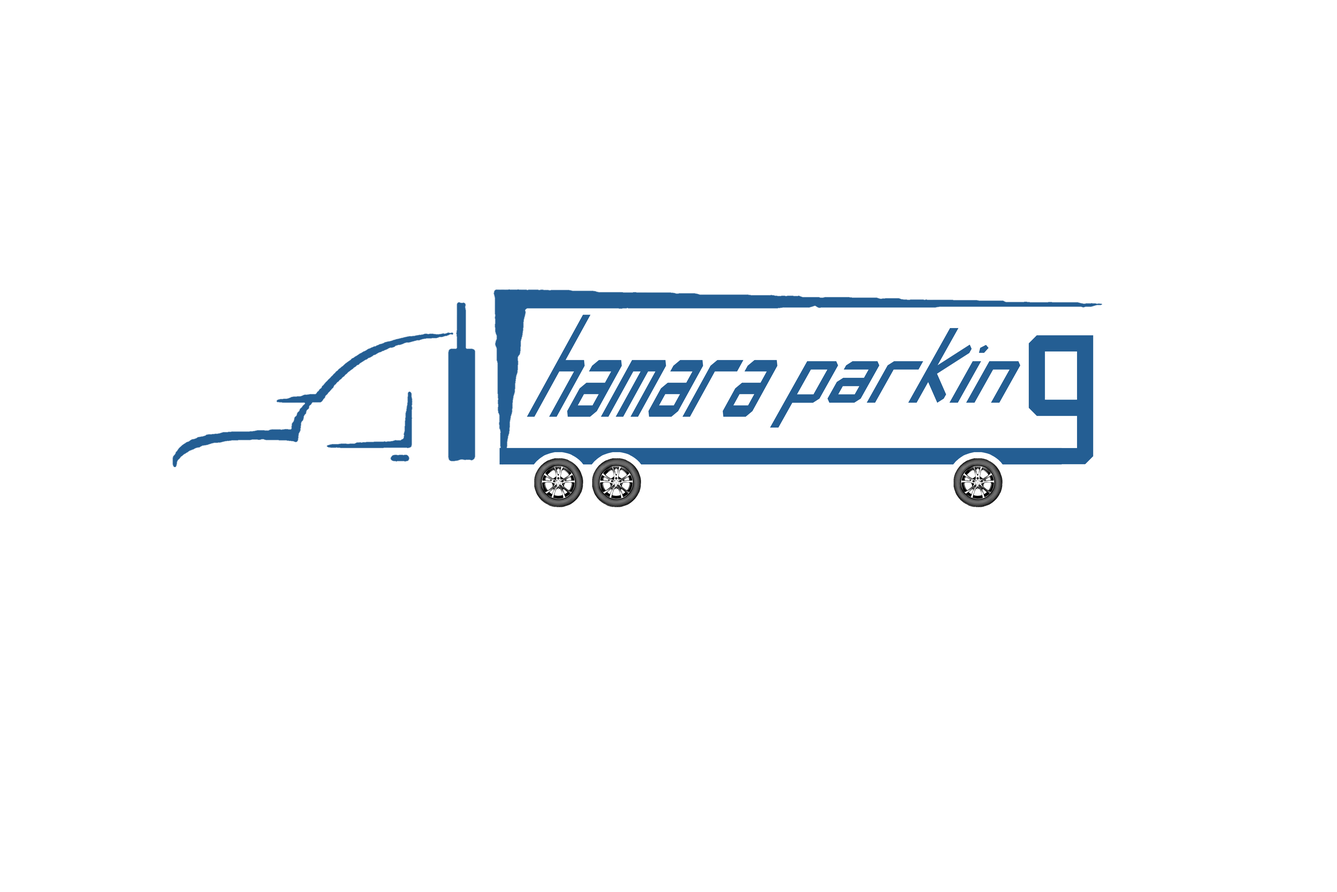
<style>
.page{position:relative;width:1337px;height:892px;background:#ffffff}
.page>*{position:absolute;margin:0}
.t1{font:206.8px "Banana-Square";color:#245e93;scale:0.57 1}
.t2{font:151.9px "Banana-Square";color:#245e93;scale:0.87 1}
.t3{font:257.6px "Banana-Square";color:#245e93}
</style>
<div class="page">
<p class="t1" style="left:527px;top:314px;width:251px;height:103px">hamara</p>
<p class="t2" style="left:770px;top:328px;width:251px;height:99px">parkin</p>
<p class="t3" style="left:1029px;top:335px;width:65px;height:129px">g</p>
</div>
